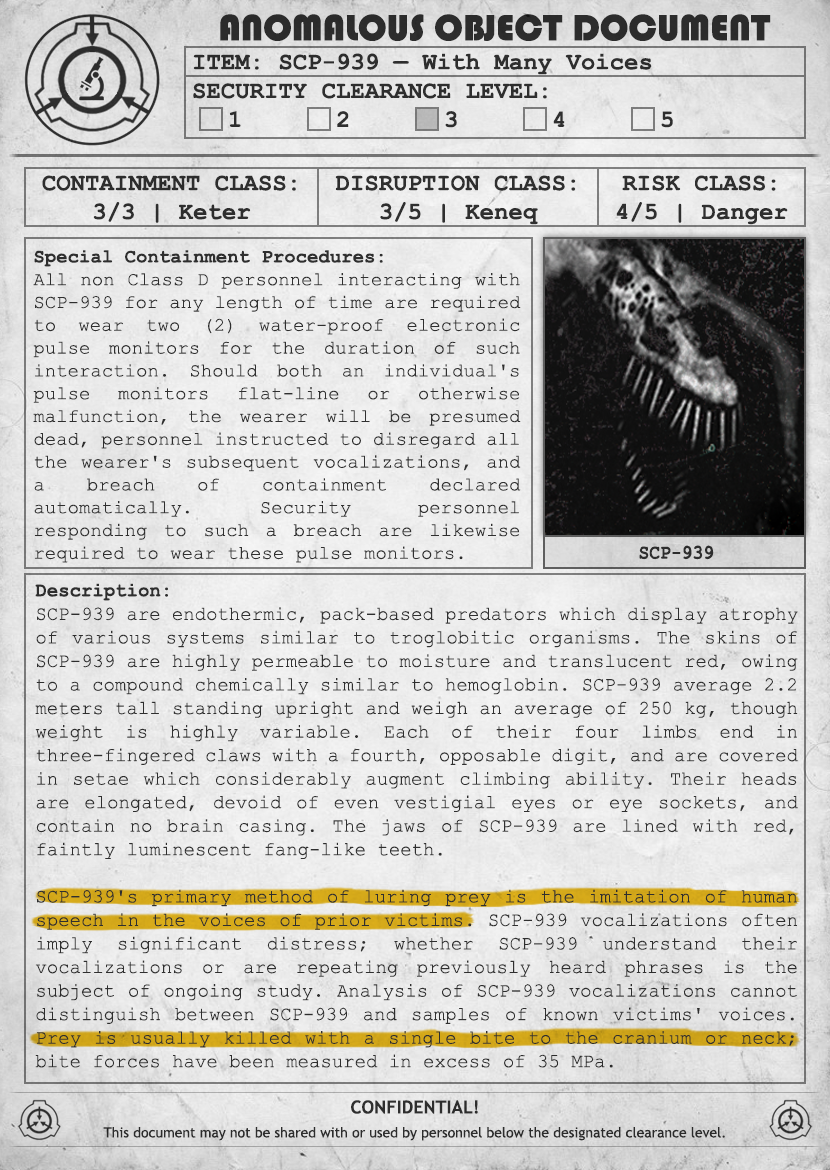
<style>
.page{position:relative;width:830px;height:1170px}
.page>*{position:absolute;margin:0}
.t1{font:38px "Bauhaus93";color:#333333;text-transform:uppercase}
.t2{font:24px "CourierNewPS-BoldMT";color:#333333}
.t3{font:24px "CourierNewPS-BoldMT";color:#333333;text-transform:uppercase}
.t4{font:19px "CourierNewPSMT";color:#333333}
.t5{font:19px "CourierNewPS-BoldMT";color:#333333}
.t6{font:20.1px "CourierNewPS-BoldMT";color:#333333;scale:0.9 1}
.t7{font:19.6px "CourierNewPSMT";color:#333333;scale:0.97 1}
.t8{font:19.6px "CourierNewPS-BoldMT";color:#333333;scale:0.97 1}
.t9{font:14px/24px "TrebuchetMS";color:#333333}
.t10{font:18px/24px "TrebuchetMS-Bold";color:#333333}
</style>
<div class="page">
<p class="t1" style="left:220px;top:14px;width:551px;height:27px">anomalous object document</p>
<p class="t2" style="left:193px;top:53px;width:480px;height:75px">ITEM: SCP-939 — With Many Voices<br><span class="t3">Security CLEARANCE LEVEL:</span> <br> 1   2   3   4   5</p>
<p class="t2" style="left:42px;top:175px;width:254px;height:48px;text-align:center">CONTAINMENT CLASS:<br>3/3 | Keter</p>
<p class="t2" style="left:335px;top:175px;width:241px;height:50px;text-align:center">DISRUPTION CLASS:<br>3/5 | Keneq</p>
<p class="t2" style="left:616px;top:175px;width:172px;height:50px;text-align:center">RISK CLASS:<br>4/5 | Danger</p>
<p class="t4" style="left:33px;top:250px;width:488px;height:313px;text-align:justify"><span class="t5">Special Containment Procedures:</span><br>All non Class D personnel interacting with SCP-939 for any length of time are required to wear two (2) water-proof electronic pulse monitors for the duration of such interaction. Should both an individual's pulse monitors flat-line or otherwise malfunction, the wearer will be presumed dead, personnel instructed to disregard all the wearer's subsequent vocalizations, and a breach of containment declared automatically. Security personnel responding to such a breach are likewise required to wear these pulse monitors.</p>
<p class="t6" style="left:639px;top:545px;width:75px;height:15px">SCP-939</p>
<p class="t7" style="left:35px;top:583px;width:763px;height:485px;text-align:justify"><span class="t8">Description:<br></span>SCP-939 are endothermic, pack-based predators which display atrophy of various systems similar to troglobitic organisms. The skins of SCP-939 are highly permeable to moisture and translucent red, owing to a compound chemically similar to hemoglobin. SCP-939 average 2.2 meters tall standing upright and weigh an average of 250 kg, though weight is highly variable. Each of their four limbs end in three-fingered claws with a fourth, opposable digit, and are covered in setae which considerably augment climbing ability. Their heads are elongated, devoid of even vestigial eyes or eye sockets, and contain no brain casing. The jaws of SCP-939 are lined with red, faintly luminescent fang-like teeth.<br><br>SCP-939's primary method of luring prey is the imitation of human speech in the voices of prior victims. SCP-939 vocalizations often imply significant distress; whether SCP-939 understand their vocalizations or are repeating previously heard phrases is the subject of ongoing study. Analysis of SCP-939 vocalizations cannot distinguish between SCP-939 and samples of known victims' voices. Prey is usually killed with a single bite to the cranium or neck; bite forces have been measured in excess of 35 MPa.</p>
<p class="t9" style="left:103px;top:1100px;width:622px;height:41px;text-align:center"><span class="t10">CONFIDENTIAL!<br></span>This document may not be shared with or used by personnel below the designated clearance level.</p>
</div>
